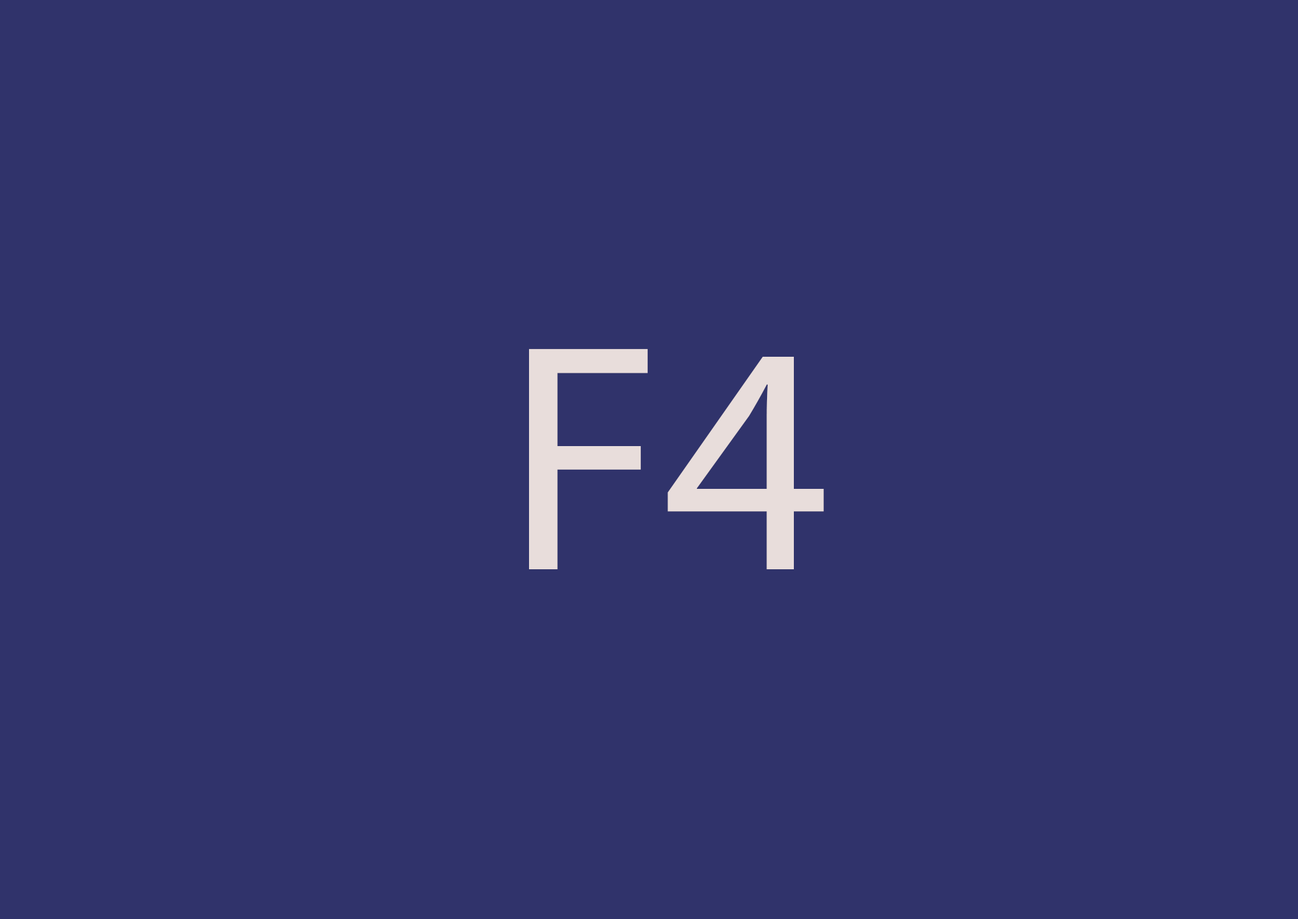
<style>
.page{position:relative;width:1298px;height:919px;background:#30336b}
.page>*{position:absolute;margin:0}
.t1{font:326.7px "MyriadPro-Regular";color:#e8dddb}
</style>
<div class="page">
<p class="t1" style="left:529px;top:348px;width:295px;height:221px">F4</p>
</div>
